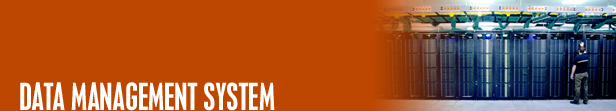
<style>
.page{position:relative;width:616px;height:111px;background:#bd4700}
.page>*{position:absolute;margin:0}
.t1{font:33.3px "PlacardMT-Condensed";color:#ffffff}
</style>
<div class="page">
<p class="t1" style="left:20px;top:82px;width:255px;height:29px">DATA MANAGEMENT SYSTEM</p>
</div>
